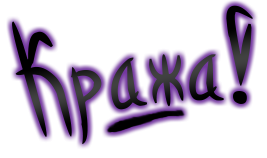
<style>
.page{position:relative;width:267px;height:158px;background:#ffffff}
.page>*{position:absolute;margin:0}
.t1{font:150.3px "simpleiriska";letter-spacing:0.01em}
</style>
<div class="page">
<p class="t1" style="left:12px;top:5px;width:241px;height:140px;rotate:-7deg">Кража!</p>
</div>
